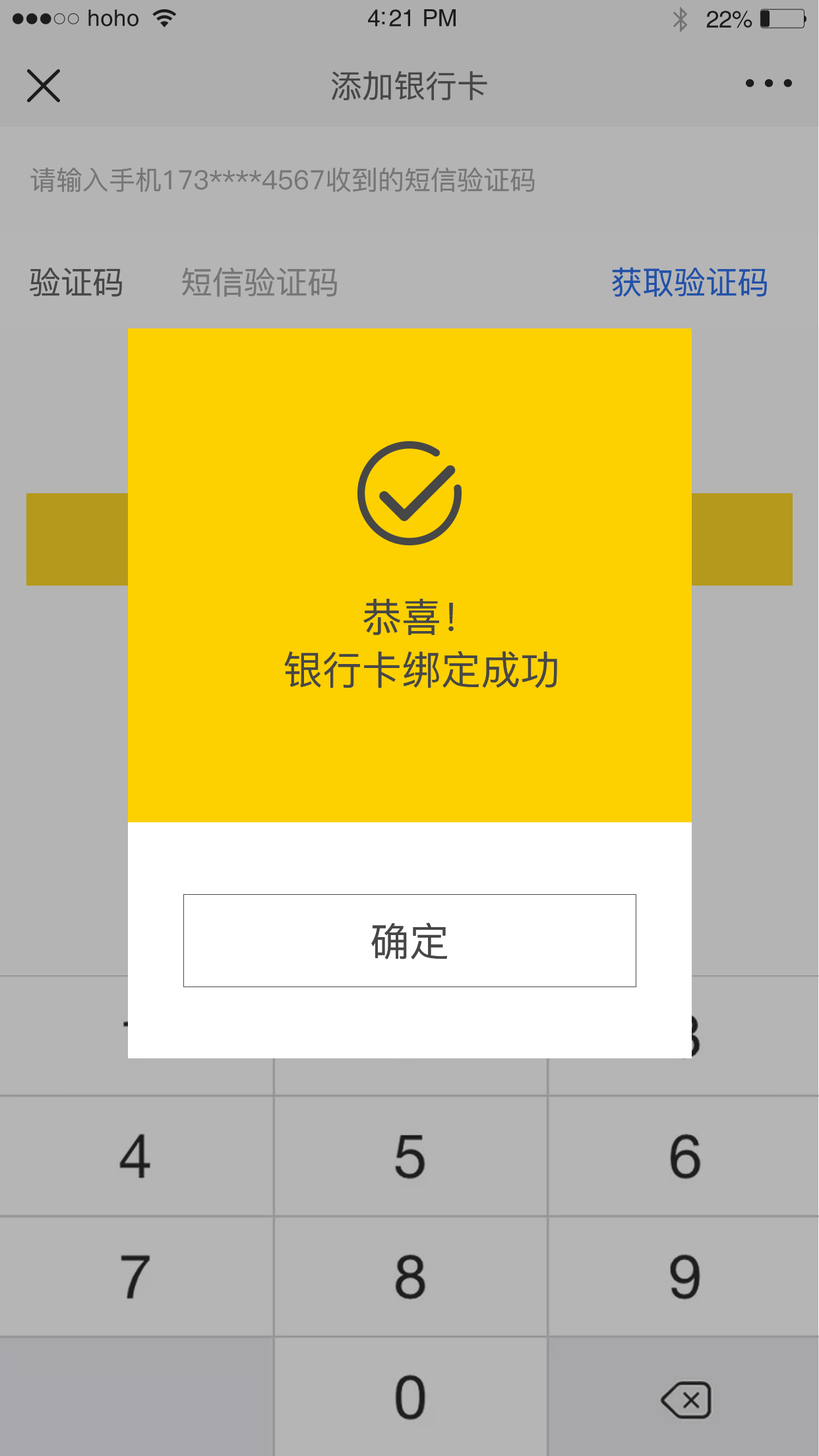
<style>
.page{position:relative;width:819px;height:1456px;background:#b5b5b5}
.page>*{position:absolute;margin:0}
.t1{font:22.8px "Helvetica";letter-spacing:0.02em;color:#1c1c1c}
.t2{font:23.8px "Helvetica";letter-spacing:-0.02em;color:#1c1c1c}
.t3{font:31.7px "PingFang-SC-Medium";color:#474747}
.t4{font:26.4px "PingFang-SC-Medium";color:#767676}
.t5{font:31.7px "PingFang-SC-Medium";color:#767676}
.t6{font:31.7px "PingFang-SC-Medium";color:#2251a9}
.t7{font:39.6px/52.8px "PingFang-SC-Medium";color:#474747}
.t8{font:39.6px "PingFang-SC-Medium";color:#474747}
</style>
<div class="page">
<p class="t1" style="left:88px;top:9px;width:50px;height:17px">hoho</p>
<p class="t2" style="left:368px;top:9px;width:88px;height:17px">4:21 PM</p>
<p class="t2" style="left:706px;top:11px;width:46px;height:17px">22%</p>
<p class="t3" style="left:332px;top:71px;width:155px;height:29px">添加银行卡</p>
<p class="t4" style="left:30px;top:167px;width:505px;height:26px">请输入手机173****4567收到的短信验证码</p>
<p class="t3" style="left:30px;top:268px;width:92px;height:29px">验证码</p>
<p class="t5" style="left:182px;top:267px;width:155px;height:30px">短信验证码</p>
<p class="t6" style="left:612px;top:267px;width:155px;height:30px">获取验证码</p>
<p class="t7" style="left:284px;top:599px;width:273px;height:89px;text-align:center">恭喜！<br>银行卡绑定成功</p>
<p class="t8" style="left:371px;top:923px;width:77px;height:36px">确定</p>
</div>
